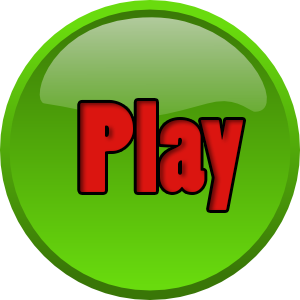
<style>
.page{position:relative;width:300px;height:300px;background:#ffffff}
.page>*{position:absolute;margin:0}
.t1{font:119.2px "PoplarStd";color:#db1510}
</style>
<div class="page">
<p class="t1" style="left:80px;top:101px;width:164px;height:109px">Play</p>
</div>
